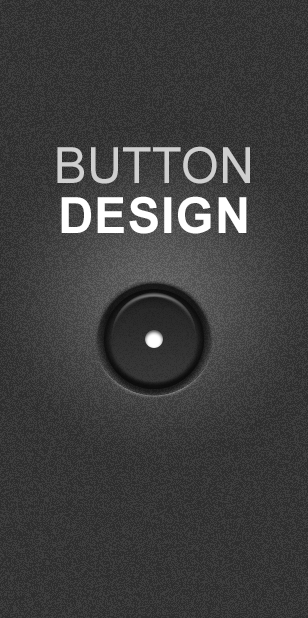
<style>
.page{position:relative;width:308px;height:618px;background:#2e2e2e}
.page>*{position:absolute;margin:0}
.t1{font:50px/50.1px "ArialMT";letter-spacing:0.005em;color:#cfcfcf;scale:0.97 1}
.t2{font:50px/50.1px "Arial-BoldMT";letter-spacing:0.025em;color:#ffffff;scale:0.97 1}
</style>
<div class="page">
<p class="t1" style="left:57px;top:146px;width:193px;height:88px;text-align:center">BUTTON<br><span class="t2">DESIGN</span></p>
</div>
